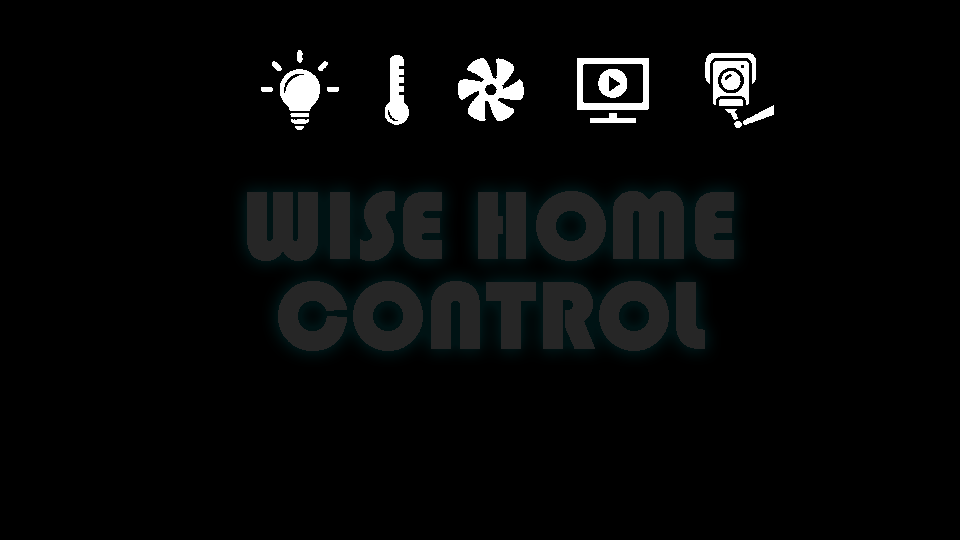
<style>
.page{position:relative;width:960px;height:540px;background:#000000}
.page>*{position:absolute;margin:0}
.t1{font:100px/90px "Bauhaus93";color:#262626;text-transform:uppercase}
</style>
<div class="page">
<p class="t1" style="left:247px;top:191px;width:487px;height:160px;text-align:center">Wise home<br>control</p>
</div>
